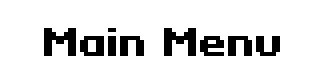
<style>
.page{position:relative;width:316px;height:84px;background:#ffffff}
.page>*{position:absolute;margin:0}
.t1{font:36px "PixeloidSans-Bold";color:#000000}
</style>
<div class="page">
<p class="t1" style="left:44px;top:28px;width:236px;height:28px">Main Menu</p>
</div>
